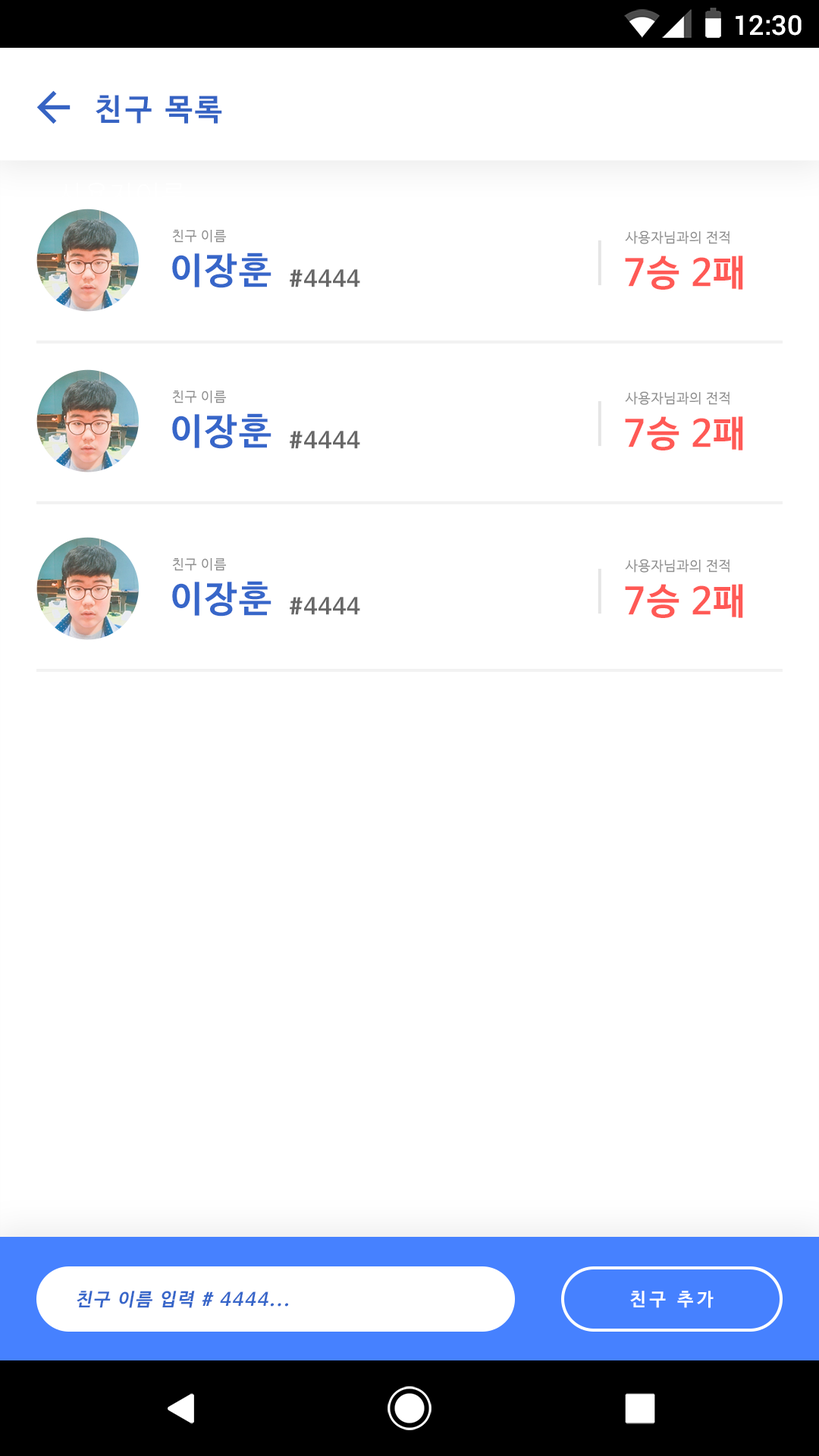
<style>
.page{position:relative;width:819px;height:1456px;background:#ffffff}
.page>*{position:absolute;margin:0}
.t1{font:27.3px "Roboto-Medium";color:#ffffff}
.t2{font:30.3px "NanumBarunGothicBold";letter-spacing:0.1em;color:#3663c3}
.t3{font:13.7px "NanumBarunGothic";letter-spacing:0.05em;color:#8d8d8d}
.t4{font:36.5px "NanumBarunGothicBold";letter-spacing:0.05em;color:#3766c9}
.t5{font:36.5px "NanumBarunGothicBold";letter-spacing:0.05em;color:#ff5955}
.t6{font:22.7px "NanumBarunGothicBold";letter-spacing:0.05em;color:#676767}
.t7{font:18.2px "NanumBarunGothicBold";letter-spacing:0.1em;color:#3766c9;font-style:italic}
.t8{font:18.2px "NanumBarunGothicBold";letter-spacing:0.2em;color:#ffffff}
</style>
<div class="page">
<p class="t1" style="left:736px;top:15px;width:66px;height:21px">12:30</p>
<p class="t2" style="left:96px;top:95px;width:126px;height:29px">친구 목록</p>
<p class="t3" style="left:172px;top:230px;width:54px;height:13px">친구 이름</p>
<p class="t3" style="left:625px;top:231px;width:105px;height:13px">사용자님과의 전적</p>
<p class="t4" style="left:172px;top:253px;width:99px;height:35px">이장훈</p>
<p class="t5" style="left:625px;top:256px;width:118px;height:34px">7승 2패</p>
<p class="t6" style="left:290px;top:269px;width:70px;height:18px">#4444</p>
<p class="t3" style="left:172px;top:391px;width:54px;height:12px">친구 이름</p>
<p class="t3" style="left:625px;top:391px;width:105px;height:14px">사용자님과의 전적</p>
<p class="t4" style="left:172px;top:413px;width:99px;height:36px">이장훈</p>
<p class="t5" style="left:625px;top:416px;width:118px;height:34px">7승 2패</p>
<p class="t6" style="left:290px;top:431px;width:70px;height:18px">#4444</p>
<p class="t3" style="left:172px;top:558px;width:54px;height:13px">친구 이름</p>
<p class="t3" style="left:625px;top:559px;width:105px;height:14px">사용자님과의 전적</p>
<p class="t4" style="left:172px;top:581px;width:99px;height:36px">이장훈</p>
<p class="t5" style="left:625px;top:584px;width:118px;height:34px">7승 2패</p>
<p class="t6" style="left:290px;top:597px;width:70px;height:18px">#4444</p>
<p class="t7" style="left:77px;top:1291px;width:211px;height:17px">친구 이름 입력 # 4444...</p>
<p class="t8" style="left:630px;top:1291px;width:84px;height:17px">친구 추가</p>
</div>
